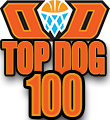
<style>
.page{position:relative;width:110px;height:120px;background:#f15c22}
.page>*{position:absolute;margin:0}
.t1{font:42px "Impact";letter-spacing:-0.04em;color:#f15c22;text-transform:uppercase;font-weight:bold;scale:0.75 1}
.t2{font:52px "Impact";letter-spacing:-0.045em;text-transform:uppercase;font-weight:bold;scale:0.77 1}
</style>
<div class="page">
<p class="t1" style="left:2px;top:41px;width:103px;height:34px">Top Dog</p>
<p class="t2" style="left:26px;top:73px;width:57px;height:44px">100</p>
</div>
